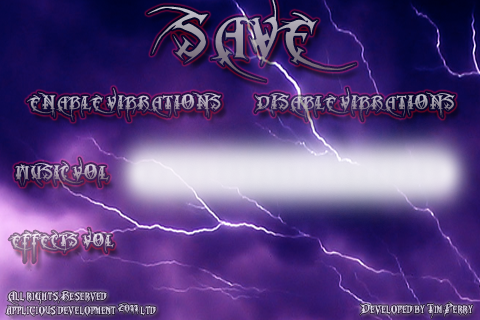
<style>
.page{position:relative;width:480px;height:320px}
.page>*{position:absolute;margin:0}
.t1{font:14px "MetalMacabre";scale:0.85 1}
.t2{font:12px "MetalMacabre";scale:0.85 1}
.t3{font:9.4px/14.1px "MetalMacabre";color:#e0d7e9;scale:0.85 1}
.t4{font:9.4px "MetalMacabre";color:#dbd3e6;scale:0.85 1}
</style>
<div class="page">
<p class="t1" style="left:27px;top:88px;width:194px;height:33px;text-align:center">ENABLE VIBRATIONS</p>
<p class="t1" style="left:255px;top:88px;width:200px;height:33px;text-align:center">DISABLE VIBRATIONS</p>
<p class="t1" style="left:15px;top:158px;width:94px;height:29px;text-align:center">MUSIC VOL</p>
<p class="t2" style="left:9px;top:228px;width:105px;height:35px;text-align:center">EFFECTS  VOL</p>
<p class="t3" style="left:5px;top:290px;width:151px;height:26px">All rights Reserved <br>applicious development 2011 ltd.</p>
<p class="t4" style="left:360px;top:302px;width:113px;height:17px">Developed by Tim Perry</p>
</div>
